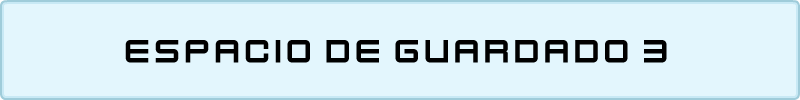
<style>
.page{position:relative;width:800px;height:100px;background:#e3f6fd}
.page>*{position:absolute;margin:0}
.t1{font:36px "KenVector-Future";color:#000000}
</style>
<div class="page">
<p class="t1" style="left:125px;top:40px;width:542px;height:23px">espacio de guardado 3</p>
</div>
